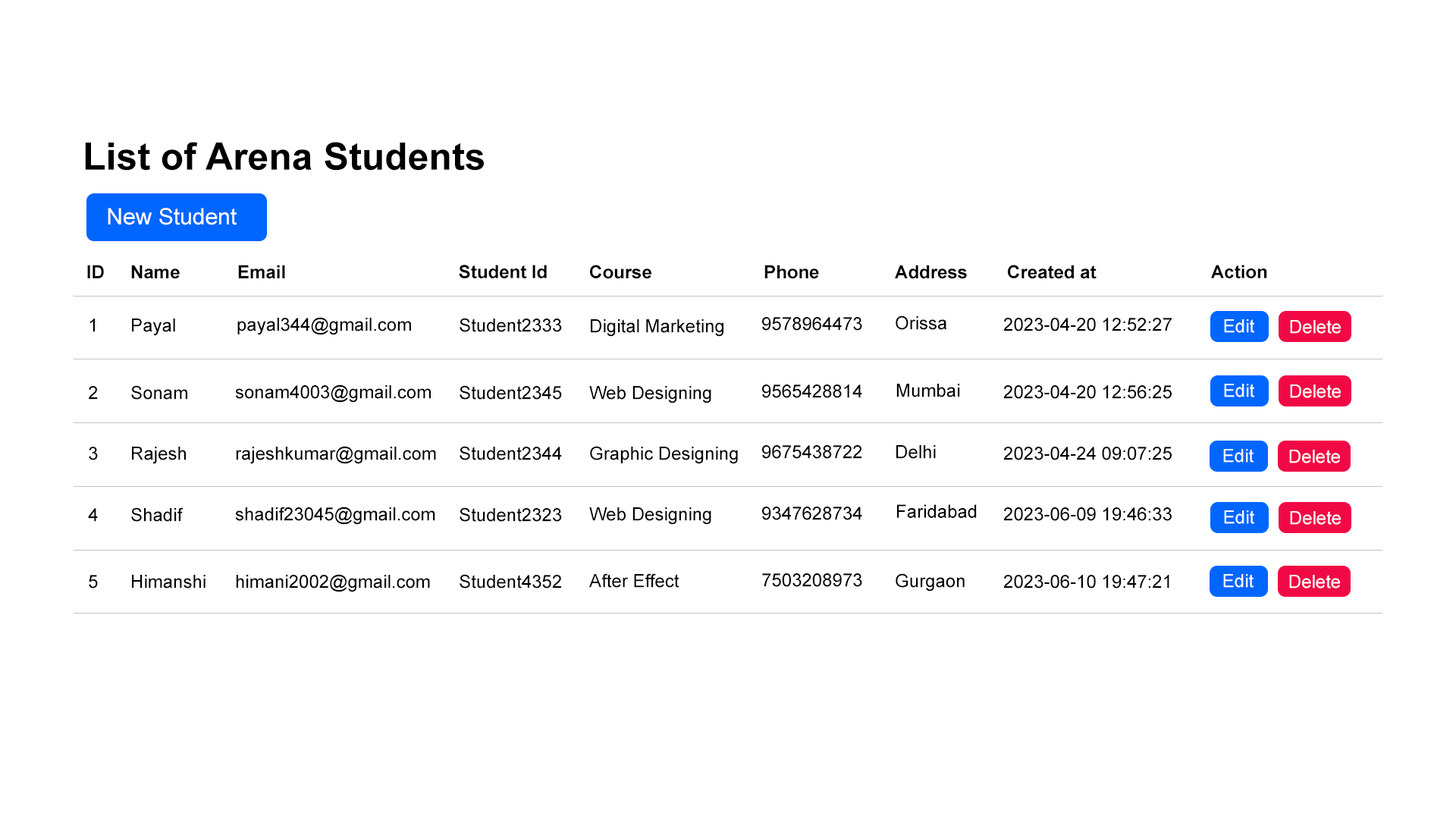
<style>
.page{position:relative;width:1456px;height:819px;background:#ffffff}
.page>*{position:absolute;margin:0}
.t1{font:37.9px "Arial-BoldMT";color:#000000}
.t2{font:22.7px "ArialMT";color:#ffffff}
.t3{font:18.2px "Arial-BoldMT";color:#000000}
.t4{font:18.2px "ArialMT";color:#000000}
.t5{font:18.2px "ArialMT";color:#fafafa}
</style>
<div class="page">
<p class="t1" style="left:85px;top:142px;width:399px;height:29px">List of Arena Students</p>
<p class="t2" style="left:108px;top:208px;width:129px;height:17px">New Student</p>
<p class="t3" style="left:87px;top:265px;width:17px;height:13px">ID</p>
<p class="t3" style="left:131px;top:265px;width:49px;height:14px">Name</p>
<p class="t3" style="left:238px;top:265px;width:47px;height:14px">Email</p>
<p class="t3" style="left:459px;top:265px;width:88px;height:13px">Student Id</p>
<p class="t3" style="left:590px;top:265px;width:61px;height:14px">Course</p>
<p class="t3" style="left:764px;top:265px;width:55px;height:14px">Phone</p>
<p class="t3" style="left:895px;top:265px;width:72px;height:14px">Address</p>
<p class="t3" style="left:1008px;top:265px;width:89px;height:14px">Created at</p>
<p class="t3" style="left:1211px;top:265px;width:56px;height:13px">Action</p>
<p class="t4" style="left:237px;top:317px;width:174px;height:18px">payal344@gmail.com</p>
<p class="t4" style="left:460px;top:318px;width:102px;height:14px">Student2333</p>
<p class="t4" style="left:762px;top:317px;width:100px;height:14px">9578964473</p>
<p class="t4" style="left:896px;top:315px;width:51px;height:15px">Orissa</p>
<p class="t4" style="left:1003px;top:318px;width:169px;height:13px">2023-04-20 12:52:27</p>
<p class="t4" style="left:89px;top:318px;width:6px;height:14px">1</p>
<p class="t4" style="left:132px;top:318px;width:43px;height:18px">Payal</p>
<p class="t4" style="left:591px;top:319px;width:132px;height:18px">Digital Marketing</p>
<p class="t5" style="left:1224px;top:319px;width:30px;height:14px">Edit</p>
<p class="t5" style="left:1290px;top:320px;width:51px;height:14px">Delete</p>
<p class="t4" style="left:89px;top:386px;width:9px;height:14px">2</p>
<p class="t4" style="left:131px;top:385px;width:56px;height:15px">Sonam</p>
<p class="t4" style="left:235px;top:384px;width:196px;height:19px">sonam4003@gmail.com</p>
<p class="t4" style="left:460px;top:385px;width:102px;height:15px">Student2345</p>
<p class="t4" style="left:589px;top:386px;width:122px;height:17px">Web Designing</p>
<p class="t4" style="left:762px;top:384px;width:100px;height:14px">9565428814</p>
<p class="t4" style="left:896px;top:384px;width:64px;height:13px">Mumbai</p>
<p class="t4" style="left:1003px;top:385px;width:169px;height:14px">2023-04-20 12:56:25</p>
<p class="t5" style="left:1224px;top:384px;width:30px;height:13px">Edit</p>
<p class="t5" style="left:1290px;top:384px;width:51px;height:14px">Delete</p>
<p class="t4" style="left:89px;top:447px;width:9px;height:13px">3</p>
<p class="t4" style="left:132px;top:447px;width:54px;height:17px">Rajesh</p>
<p class="t4" style="left:236px;top:446px;width:200px;height:18px">rajeshkumar@gmail.com</p>
<p class="t4" style="left:460px;top:446px;width:102px;height:14px">Student2344</p>
<p class="t4" style="left:590px;top:446px;width:148px;height:18px">Graphic Designing</p>
<p class="t4" style="left:762px;top:445px;width:100px;height:14px">9675438722</p>
<p class="t4" style="left:896px;top:445px;width:40px;height:14px">Delhi</p>
<p class="t4" style="left:1003px;top:447px;width:169px;height:13px">2023-04-24 09:07:25</p>
<p class="t5" style="left:1223px;top:449px;width:31px;height:14px">Edit</p>
<p class="t5" style="left:1289px;top:450px;width:51px;height:13px">Delete</p>
<p class="t4" style="left:88px;top:508px;width:10px;height:14px">4</p>
<p class="t4" style="left:131px;top:507px;width:53px;height:15px">Shadif</p>
<p class="t4" style="left:235px;top:507px;width:200px;height:18px">shadif23045@gmail.com</p>
<p class="t4" style="left:460px;top:507px;width:102px;height:15px">Student2323</p>
<p class="t4" style="left:589px;top:507px;width:122px;height:18px">Web Designing</p>
<p class="t4" style="left:762px;top:507px;width:100px;height:13px">9347628734</p>
<p class="t4" style="left:897px;top:504px;width:80px;height:14px">Faridabad</p>
<p class="t4" style="left:1003px;top:507px;width:169px;height:14px">2023-06-09 19:46:33</p>
<p class="t5" style="left:1224px;top:510px;width:30px;height:14px">Edit</p>
<p class="t5" style="left:1290px;top:511px;width:51px;height:14px">Delete</p>
<p class="t4" style="left:89px;top:575px;width:9px;height:13px">5</p>
<p class="t4" style="left:132px;top:575px;width:74px;height:13px">Himanshi</p>
<p class="t4" style="left:236px;top:574px;width:194px;height:18px">himani2002@gmail.com</p>
<p class="t4" style="left:460px;top:574px;width:101px;height:14px">Student4352</p>
<p class="t4" style="left:589px;top:573px;width:90px;height:15px">After Effect</p>
<p class="t4" style="left:762px;top:573px;width:100px;height:14px">7503208973</p>
<p class="t4" style="left:896px;top:573px;width:69px;height:18px">Gurgaon</p>
<p class="t4" style="left:1003px;top:575px;width:166px;height:13px">2023-06-10 19:47:21</p>
<p class="t5" style="left:1223px;top:574px;width:31px;height:14px">Edit</p>
<p class="t5" style="left:1289px;top:575px;width:51px;height:13px">Delete</p>
</div>
